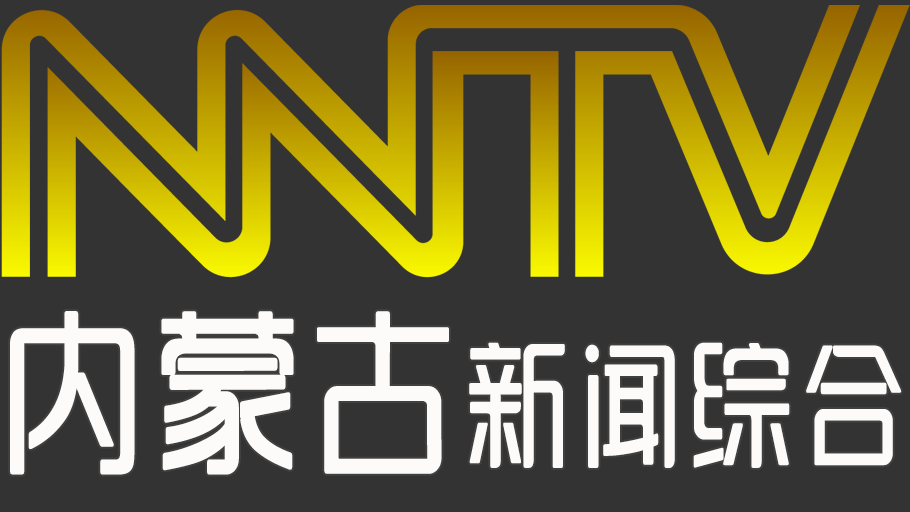
<style>
.page{position:relative;width:910px;height:512px;background:#333333}
.page>*{position:absolute;margin:0}
.t1{font:137.5px "SJyunlvyuan";letter-spacing:0.02em;color:#fcfbf9;scale:0.8 1}
.t2{font:179.2px "SJyunlvyuan";letter-spacing:0.02em;color:#fcfbf9;scale:0.85 1}
</style>
<div class="page">
<p class="t1" style="left:10px;top:311px;width:892px;height:164px"><span class="t2">内蒙古</span>新闻综合</p>
</div>
